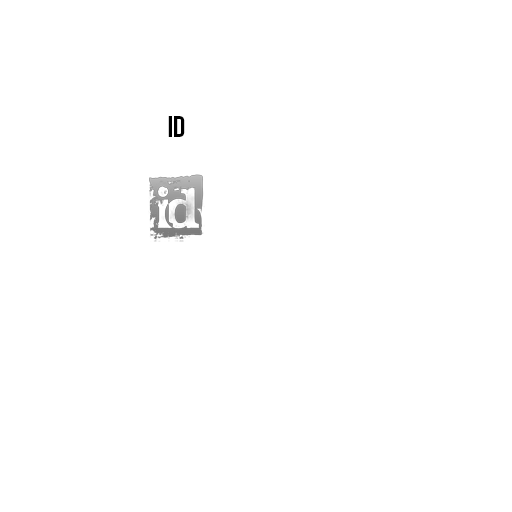
<style>
.page{position:relative;width:512px;height:512px;background:#ffffff}
.page>*{position:absolute;margin:0}
.t1{font:30px "BebasNeue";color:#000000}
</style>
<div class="page">
<p class="t1" style="left:168px;top:116px;width:17px;height:21px">id</p>
</div>
